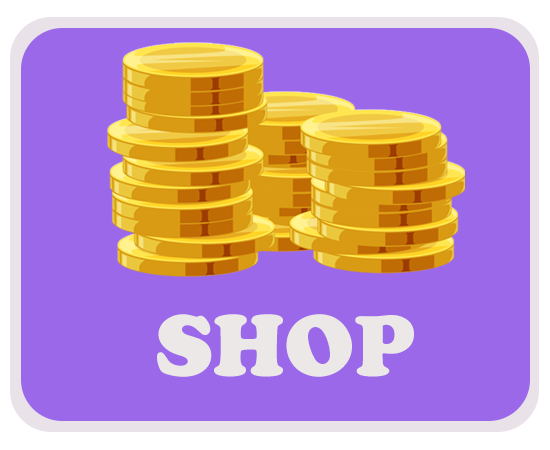
<style>
.page{position:relative;width:550px;height:450px;background:#9b68e9}
.page>*{position:absolute;margin:0}
.t1{font:90px "CooperBlack";color:#ece8e8}
</style>
<div class="page">
<p class="t1" style="left:157px;top:314px;width:257px;height:63px">SHOP</p>
</div>
